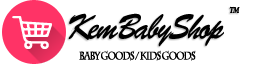
<style>
.page{position:relative;width:255px;height:64px;background:#ffffff}
.page>*{position:absolute;margin:0}
.t1{font:9px "MinionPro-BoldIt";letter-spacing:-0.1em;color:#000000;scale:0.8 1}
.t2{font:36px "BrushScriptStd";letter-spacing:-0.05em;color:#000000;font-style:italic;scale:0.8 1}
.t3{font:11px "CharlemagneStd-Bold";letter-spacing:-0.1em;color:#000000;scale:0.8 1}
</style>
<div class="page">
<p class="t1" style="left:229px;top:6px;width:11px;height:7px">TM</p>
<p class="t2" style="left:68px;top:13px;width:156px;height:34px">KemBabyShop</p>
<p class="t3" style="left:79px;top:50px;width:117px;height:11px">Baby Goods / Kids Goods</p>
</div>
